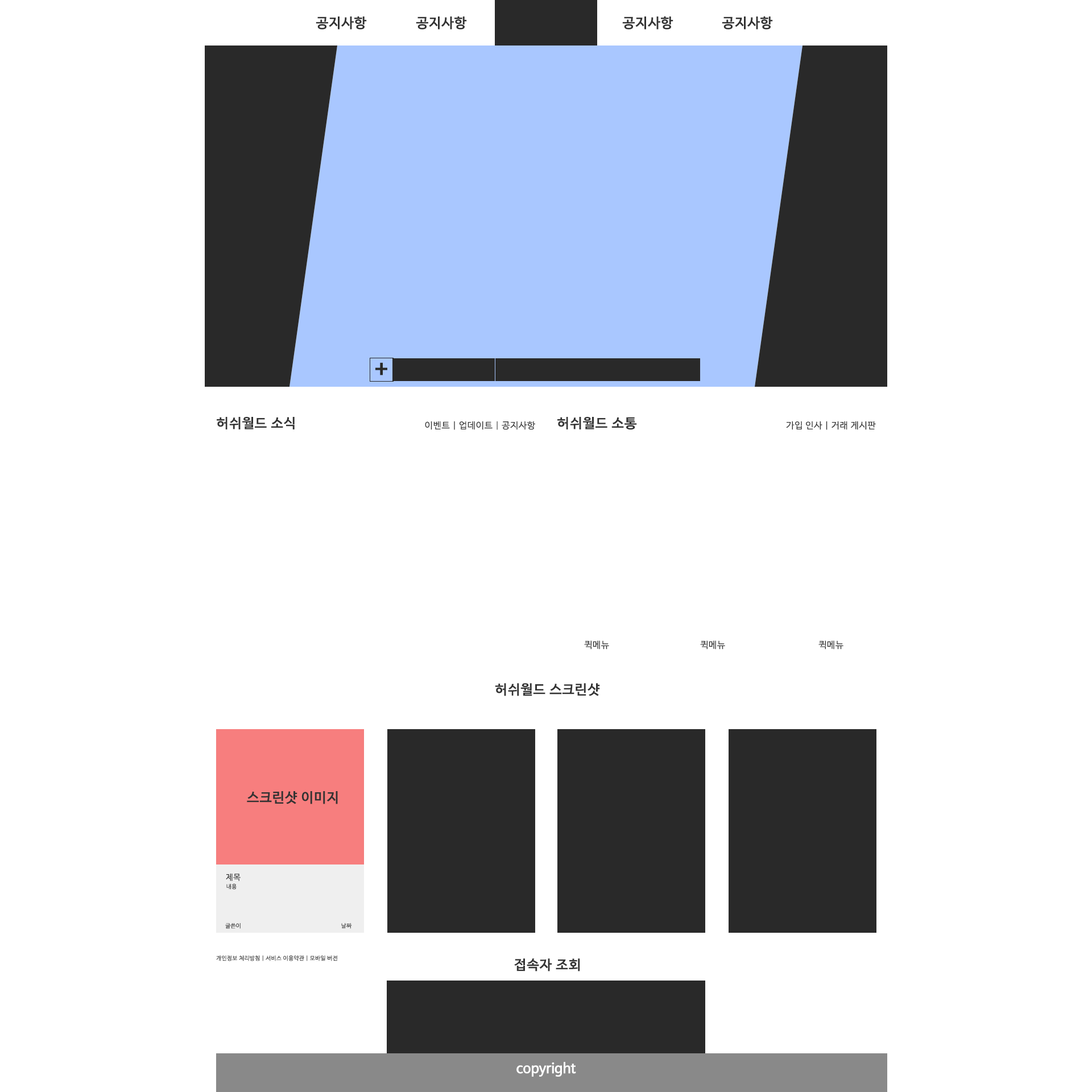
<style>
.page{position:relative;width:1092px;height:1092px;background:#ffffff}
.page>*{position:absolute;margin:0}
.t1{font:13.6px "HancomGothicBold";color:#333333}
.t2{font:24.6px "HancomGothicBold";color:#292929}
.t3{font:13.4px "HancomGothicBold";color:#333333}
.t4{font:8.9px "HancomGothicRegular";color:#333333}
.t5{font:9.1px "HancomGothicRegular";color:#333333}
.t6{font:13.5px "HancomGothicBold";color:#333333}
.t7{font:8px "HancomGothicRegular";color:#333333}
.t8{font:5.7px "HancomGothicRegular";color:#333333}
.t9{font:13.6px "HancomGothicBold";color:#ffffff}
</style>
<div class="page">
<p class="t1" style="left:316px;top:16px;width:51px;height:14px">공지사항</p>
<p class="t1" style="left:416px;top:16px;width:51px;height:14px">공지사항</p>
<p class="t1" style="left:622px;top:16px;width:51px;height:14px">공지사항</p>
<p class="t1" style="left:722px;top:16px;width:51px;height:14px">공지사항</p>
<p class="t2" style="left:375px;top:362px;width:12px;height:13px">+</p>
<p class="t3" style="left:217px;top:417px;width:78px;height:12px">허쉬월드 소식</p>
<p class="t4" style="left:425px;top:421px;width:110px;height:9px">이벤트 | 업데이트 | 공지사항</p>
<p class="t3" style="left:557px;top:417px;width:80px;height:13px">허쉬월드 소통</p>
<p class="t4" style="left:786px;top:421px;width:90px;height:9px">가입 인사 | 거래 게시판</p>
<p class="t5" style="left:584px;top:640px;width:25px;height:10px">퀵메뉴</p>
<p class="t5" style="left:700px;top:640px;width:25px;height:10px">퀵메뉴</p>
<p class="t5" style="left:818px;top:640px;width:25px;height:10px">퀵메뉴</p>
<p class="t6" style="left:495px;top:683px;width:105px;height:13px">허쉬월드 스크린샷</p>
<p class="t1" style="left:247px;top:791px;width:91px;height:13px">스크린샷 이미지</p>
<p class="t7" style="left:226px;top:874px;width:15px;height:7px">제목</p>
<p class="t8" style="left:226px;top:884px;width:11px;height:6px">내용</p>
<p class="t8" style="left:225px;top:923px;width:16px;height:6px">글쓴이</p>
<p class="t8" style="left:341px;top:923px;width:11px;height:6px">날짜</p>
<p class="t8" style="left:216px;top:955px;width:121px;height:6px">개인정보 처리방침 | 서비스 이용약관 | 모바일 버전</p>
<p class="t6" style="left:514px;top:958px;width:66px;height:13px">접속자 조회</p>
<p class="t9" style="left:516px;top:1062px;width:60px;height:15px">copyright</p>
</div>
